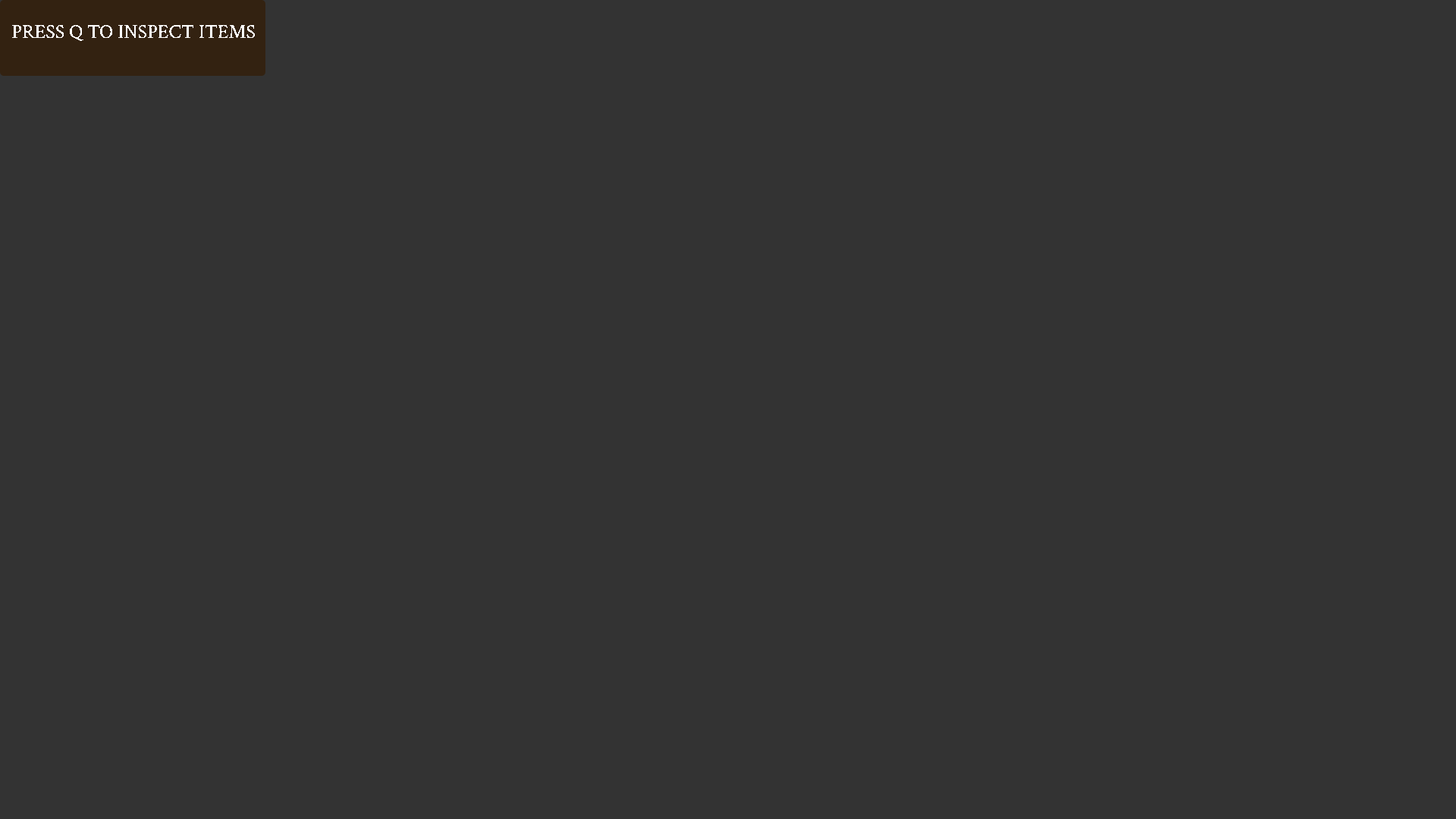
<style>
.page{position:relative;width:1456px;height:819px;background:#333333}
.page>*{position:absolute;margin:0}
.t1{font:19.7px "CrimsonText-Regular";color:#ffffff}
</style>
<div class="page">
<p class="t1" style="left:12px;top:25px;width:243px;height:16px">PRESS Q TO INSPECT ITEMS</p>
</div>
